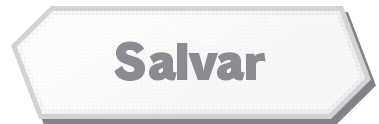
<style>
.page{position:relative;width:379px;height:124px}
.page>*{position:absolute;margin:0}
.t1{font:48px "RodinPro-UB";letter-spacing:-0.043em;color:#8b8c92}
</style>
<div class="page">
<p class="t1" style="left:114px;top:41px;width:152px;height:40px">Salvar</p>
</div>
